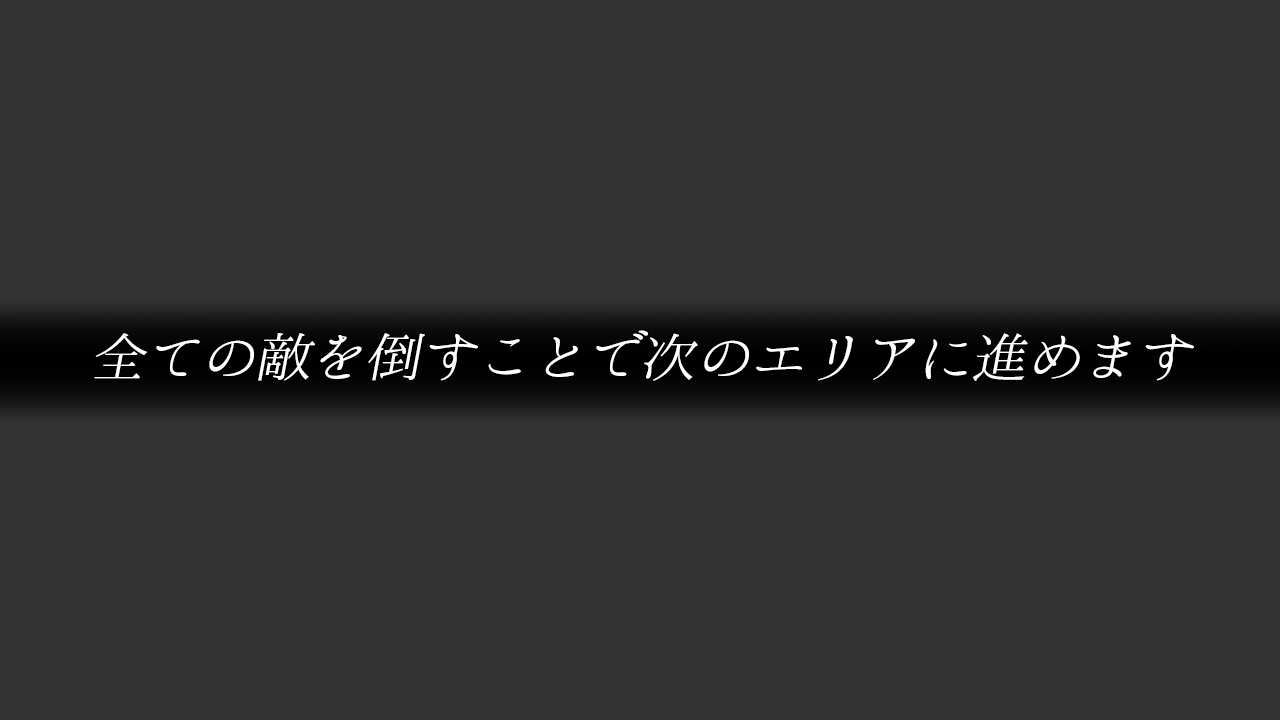
<style>
.page{position:relative;width:1280px;height:720px;background:#333333}
.page>*{position:absolute;margin:0}
.t1{font:53.3px "HannariMincho-Regular";letter-spacing:-0.025em;color:#ffffff;font-style:italic;scale:1.06 1}
</style>
<div class="page">
<p class="t1" style="left:94px;top:330px;width:1100px;height:51px">全ての敵を倒すことで次のエリアに進めます</p>
</div>
